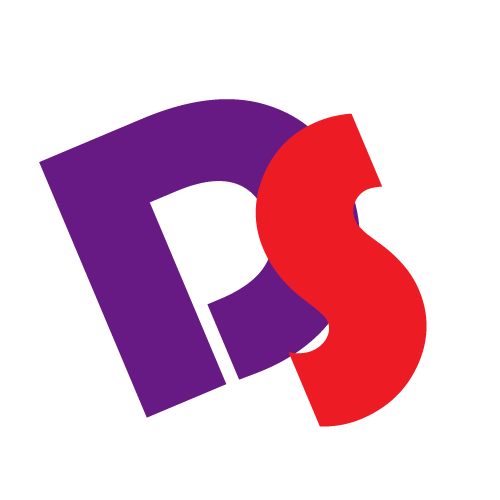
<style>
.page{position:relative;width:500px;height:500px;background:#ffffff}
.page>*{position:absolute;margin:0}
.t1{font:415.6px "Bauhaus93";letter-spacing:0.03em;color:#661982;scale:1.04 1}
.t2{font:415.6px "Bauhaus93";letter-spacing:0.03em;color:#ed1c24;scale:1.04 1}
</style>
<div class="page">
<p class="t1" style="left:39px;top:99px;width:321px;height:319px;rotate:-23deg">D</p>
<p class="t2" style="left:255px;top:113px;width:172px;height:314px;rotate:-23deg">S</p>
</div>
